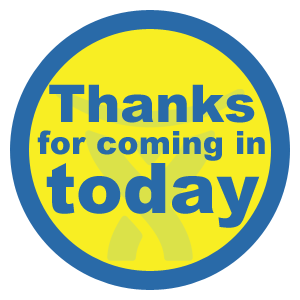
<style>
.page{position:relative;width:300px;height:300px;background:#ffffff}
.page>*{position:absolute;margin:0}
.t1{font:32px/32px "Arial-Black";color:#296aa8}
.t2{font:52px "Arial-Black";color:#296aa8}
.t3{font:70px/59px "Arial-Black";color:#296aa8}
</style>
<div class="page">
<p class="t1" style="left:37px;top:84px;width:228px;height:144px;text-align:center"><span class="t2">Thanks<br></span>for coming in<br><span class="t3">today</span></p>
</div>
